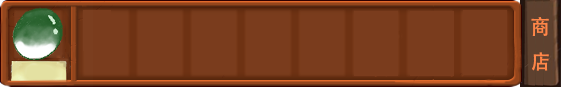
<style>
.page{position:relative;width:561px;height:87px;background:#7a3c1d}
.page>*{position:absolute;margin:0}
.t1{font:12px "AdobeHeitiStd-Regular";letter-spacing:0.01em;color:#ff8648}
</style>
<div class="page">
<p class="t1" style="left:531px;top:17px;width:18px;height:54px">商<br>店</p>
</div>
